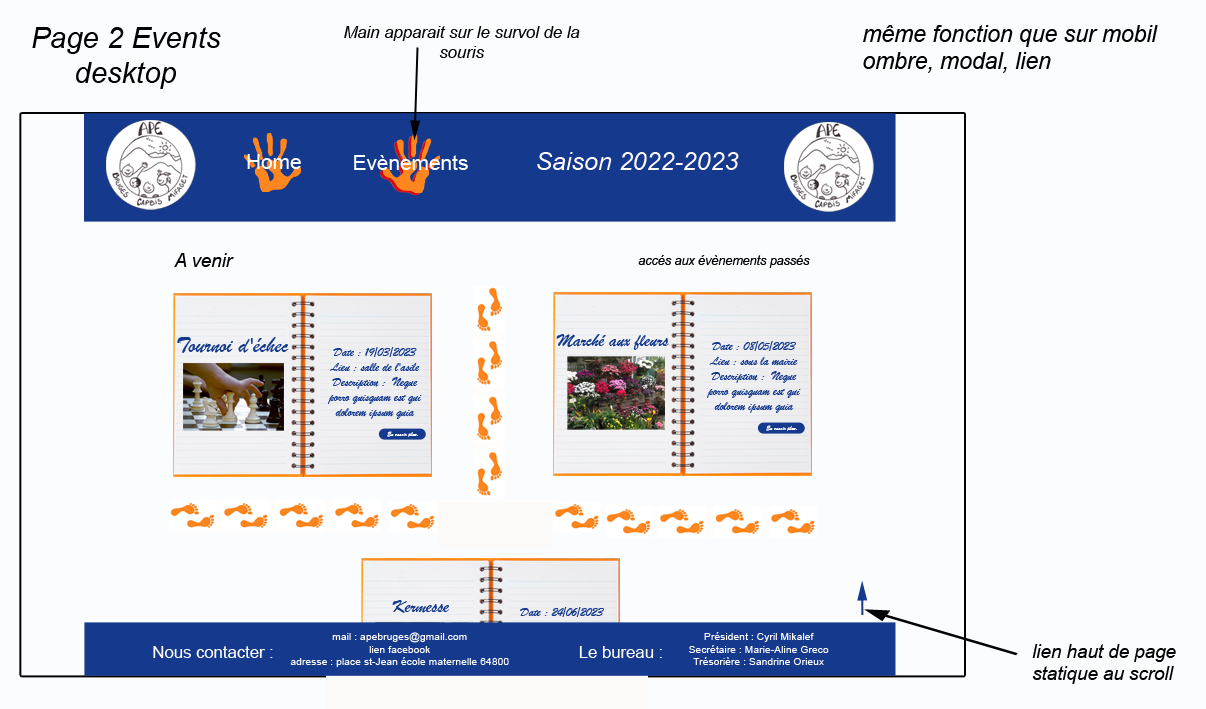
<style>
.page{position:relative;width:1206px;height:709px;background:#fbfcfe}
.page>*{position:absolute;margin:0}
.t1{font:29.2px "Arial-ItalicMT";color:#020202}
.t2{font:16.7px "Arial-ItalicMT";color:#020202}
.t3{font:22.9px "Arial-ItalicMT";color:#020202}
.t4{font:20.8px "ArialMT";color:#fdfeff}
.t5{font:25px "Arial-ItalicMT";color:#fefafa}
.t6{font:18.8px "Arial-ItalicMT";color:#020202}
.t7{font:12.5px "Arial-ItalicMT";color:#020202}
.t8{font:22.9px "BrushScriptMT";color:#14398d}
.t9{font:18.8px "BrushScriptMT";color:#14398d}
.t10{font:12.5px "BrushScriptMT";color:#14398d}
.t11{font:6.2px "BrushScriptMT";color:#ffffff}
.t12{font:6.2px "BrushScriptMT";color:#14398d}
.t13{font:10.4px "ArialMT";color:#ffffff}
.t14{font:16.7px "ArialMT";color:#ffffff}
</style>
<div class="page">
<p class="t1" style="left:32px;top:27px;width:189px;height:62px;text-align:center">Page 2 Events<br>desktop</p>
<p class="t2" style="left:344px;top:26px;width:236px;height:32px;text-align:center">Main apparait sur le survol de la souris</p>
<p class="t3" style="left:863px;top:25px;width:295px;height:48px">même fonction que sur mobil ombre, modal, lien</p>
<p class="t4" style="left:247px;top:154px;width:54px;height:15px">Home</p>
<p class="t4" style="left:354px;top:155px;width:114px;height:15px">Evènements</p>
<p class="t5" style="left:537px;top:152px;width:202px;height:18px">Saison 2022-2023</p>
<p class="t6" style="left:174px;top:253px;width:60px;height:14px">A venir</p>
<p class="t7" style="left:638px;top:255px;width:172px;height:13px">accés aux évènements passés</p>
<p class="t8" style="left:177px;top:337px;width:112px;height:16px">Tournoi d'échec</p>
<p class="t9" style="left:556px;top:334px;width:113px;height:16px">Marché aux fleurs</p>
<p class="t10" style="left:707px;top:341px;width:94px;height:72px;text-align:center">Date : 08/05/2023<br>Lieu : sous la mairie<br>Description :  Neque porro quisquam est qui dolorem ipsum quia</p>
<p class="t10" style="left:328px;top:347px;width:94px;height:72px;text-align:center">Date : 19/03/2023<br>Lieu : salle de l'asile<br>Description :  Neque porro quisquam est qui dolorem ipsum quia</p>
<p class="t11" style="left:766px;top:425px;width:35px;height:6px">En savoir plus.<span class="t12">..</span></p>
<p class="t11" style="left:387px;top:431px;width:35px;height:6px">En savoir plus.<span class="t12">..</span></p>
<p class="t9" style="left:392px;top:600px;width:58px;height:13px">Kermesse</p>
<p class="t13" style="left:290px;top:632px;width:219px;height:35px;text-align:center">mail : apebruges@gmail.com  <br>lien facebook <br>adresse : place st-Jean école maternelle 64800 Bruges</p>
<p class="t13" style="left:689px;top:632px;width:140px;height:33px;text-align:center">Président : Cyril Mikalef<br>Secrétaire : Marie-Aline Greco<br>Trésorière : Sandrine Orieux</p>
<p class="t14" style="left:153px;top:646px;width:120px;height:12px">Nous contacter :</p>
<p class="t14" style="left:579px;top:646px;width:83px;height:12px">Le bureau :</p>
<p class="t6" style="left:1032px;top:644px;width:144px;height:40px">lien haut de page statique au scroll</p>
</div>
